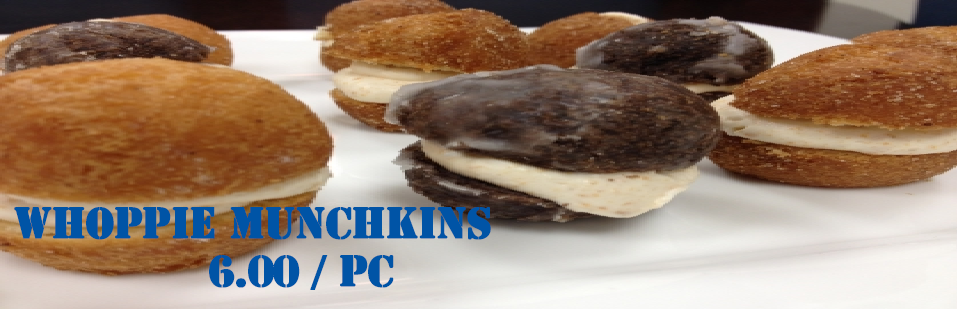
<style>
.page{position:relative;width:957px;height:309px}
.page>*{position:absolute;margin:0}
.t1{font:40px "StencilStd";letter-spacing:-0.025em;color:#0054a6;font-weight:bold}
</style>
<div class="page">
<p class="t1" style="left:14px;top:207px;width:477px;height:83px;text-align:center">WHOPPIE MUNCHKINS<br>       6.00 / PC</p>
</div>
